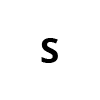
<style>
.page{position:relative;width:100px;height:100px;background:#ffffff}
.page>*{position:absolute;margin:0}
.t1{font:35px "OpenSans-Bold";color:#000000}
</style>
<div class="page">
<p class="t1" style="left:41px;top:38px;width:17px;height:25px">S</p>
</div>
